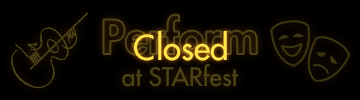
<style>
.page{position:relative;width:360px;height:100px;background:#000000}
.page>*{position:absolute;margin:0}
.t1{font:33.3px "FuturaStd-Medium";color:#ffe64d}
.t2{font:25px "FuturaStd-Medium";color:#4d4517}
</style>
<div class="page">
<p class="t1" style="left:134px;top:31px;width:93px;height:30px">Closed</p>
<p class="t2" style="left:122px;top:64px;width:116px;height:23px">at STARfest</p>
</div>
